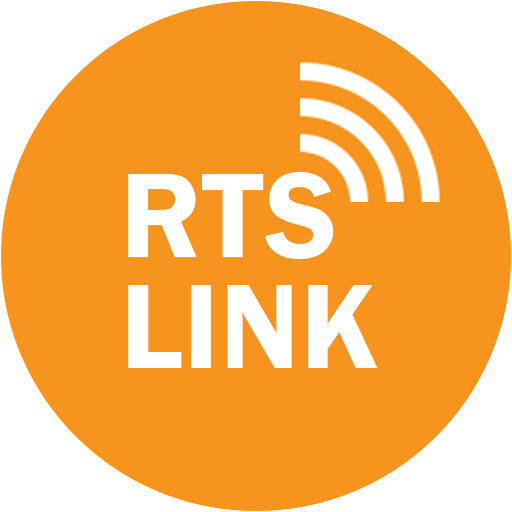
<style>
.page{position:relative;width:512px;height:512px;background:#f7941d}
.page>*{position:absolute;margin:0}
.t1{font:125px/111.1px "FranklinGothic-Demi";color:#ffffff}
</style>
<div class="page">
<p class="t1" style="left:128px;top:172px;width:250px;height:196px">RTS<br>LINK</p>
</div>
